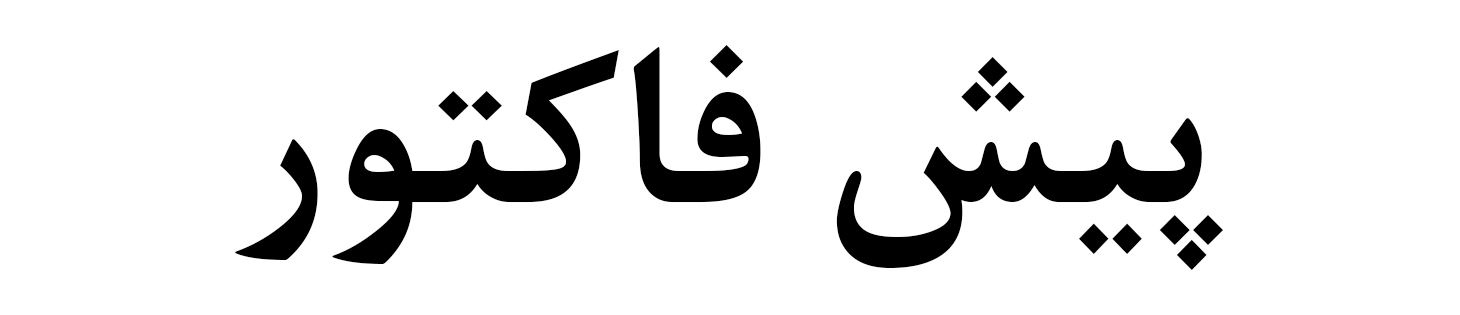
<style>
.page{position:relative;width:1460px;height:315px;background:#ffffff}
.page>*{position:absolute;margin:0}
.t1{font:250px "BNazaninBold";color:#000000}
</style>
<div class="page">
<p class="t1" style="left:235px;top:45px;width:989px;height:225px">پیش فاکتور</p>
</div>
